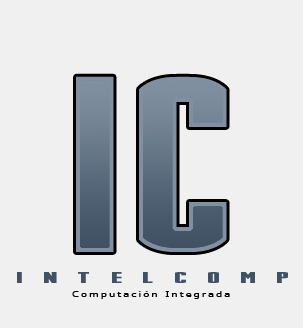
<style>
.page{position:relative;width:303px;height:328px;background:#f0f0f0}
.page>*{position:absolute;margin:0}
.t1{font:256px "Stark"}
.t2{font:16px "Stark";color:#405164;scale:2 1}
.t3{font:8px "Verdana";letter-spacing:0.2em;color:#000000;scale:1.25 1}
</style>
<div class="page">
<p class="t1" style="left:76px;top:76px;width:151px;height:176px">IC</p>
<p class="t2" style="left:17px;top:272px;width:271px;height:11px">I  N  T  E  L  C  O  M  P</p>
<p class="t2" style="left:17px;top:272px;width:271px;height:11px">I  N  T  E  L  C  O  M  P</p>
<p class="t3" style="left:72px;top:291px;width:158px;height:8px">Computación Integrada</p>
</div>
